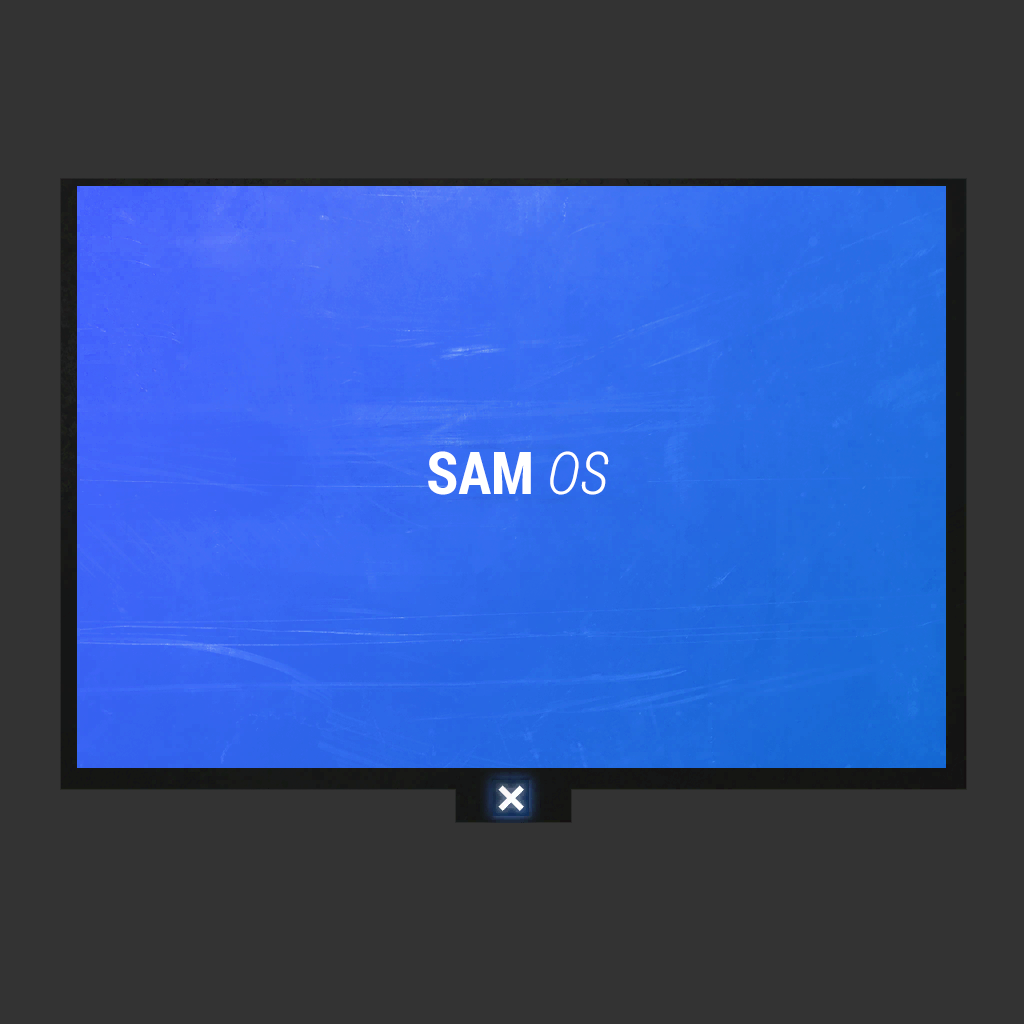
<style>
.page{position:relative;width:1024px;height:1024px;background:#333333}
.page>*{position:absolute;margin:0}
.t1{font:59px "RobotoCondensed-Bold";color:#ffffff}
.t2{font:59px "RobotoCondensed-LightItalic";color:#ffffff}
</style>
<div class="page">
<p class="t1" style="left:428px;top:451px;width:181px;height:44px">SAM <span class="t2">OS</span></p>
</div>
